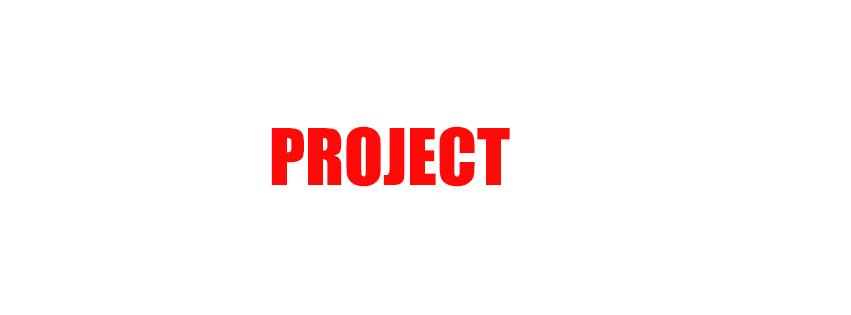
<style>
.page{position:relative;width:851px;height:315px;background:#ffffff}
.page>*{position:absolute;margin:0}
.t1{font:72px "Impact";color:#ff0909}
</style>
<div class="page">
<p class="t1" style="left:271px;top:126px;width:239px;height:61px">PROJECT</p>
</div>
